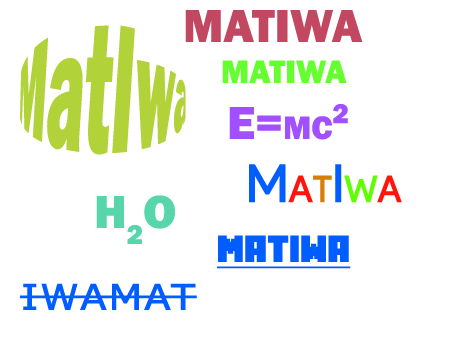
<style>
.page{position:relative;width:454px;height:340px;background:#ffffff}
.page>*{position:absolute;margin:0}
.t1{font:48px "FranklinGothic-Heavy";color:#c24761;text-transform:uppercase}
.t2{font:48px "FranklinGothic-Heavy";color:#b1d239;font-style:italic}
.t3{font:48px "FranklinGothic-Heavy";color:#65ff30;font-variant:small-caps}
.t4{font:48px "FranklinGothic-Heavy";color:#a24fff;font-variant:small-caps}
.t5{font:48px "Google-September-2015";color:#015dff;font-variant:small-caps}
.t6{font:48px "Google-September-2015";color:#ff150a;font-variant:small-caps}
.t7{font:48px "Google-September-2015";color:#d87c06;font-variant:small-caps}
.t8{font:48px "Google-September-2015";color:#60fe00;font-variant:small-caps}
.t9{font:48px "FranklinGothic-Heavy";color:#57d5aa;font-variant:small-caps}
.t10{font:48px "Minecrafter";color:#015dff;font-variant:small-caps;text-decoration:underline}
.t11{font:48px "Verdana";color:#015dff;font-variant:small-caps}
</style>
<div class="page">
<p class="t1" style="left:185px;top:10px;width:178px;height:32px">matiwa</p>
<p class="t2" style="left:20px;top:25px;width:166px;height:130px">MatIwa</p>
<p class="t3" style="left:222px;top:60px;width:125px;height:23px">matiwa</p>
<p class="t4" style="left:229px;top:104px;width:119px;height:36px">E=mc2</p>
<p class="t5" style="left:249px;top:164px;width:153px;height:39px">M<span class="t6">a</span><span class="t7">t</span>I<span class="t8">w</span><span class="t6">a</span></p>
<p class="t9" style="left:96px;top:195px;width:79px;height:49px">H2O</p>
<p class="t10" style="left:217px;top:235px;width:134px;height:34px">matiwa</p>
<p class="t11" style="left:20px;top:283px;width:177px;height:27px">iwamat</p>
</div>
